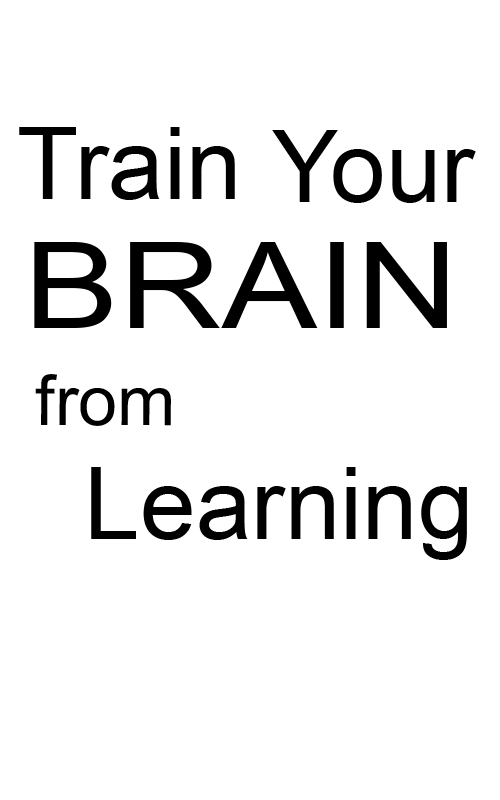
<style>
.page{position:relative;width:500px;height:800px;background:#ffffff}
.page>*{position:absolute;margin:0}
.t1{font:100px "ArialMT";color:#000000}
.t2{font:120px "ArialMT";color:#000000;scale:1.19 1}
.t3{font:70px "ArialMT";color:#000000}
</style>
<div class="page">
<p class="t1" style="left:19px;top:127px;width:216px;height:73px">Train</p>
<p class="t1" style="left:272px;top:130px;width:204px;height:73px">Your</p>
<p class="t2" style="left:34px;top:242px;width:413px;height:86px">BRAIN</p>
<p class="t3" style="left:35px;top:374px;width:136px;height:52px">from</p>
<p class="t1" style="left:91px;top:467px;width:376px;height:93px">Learning</p>
</div>
